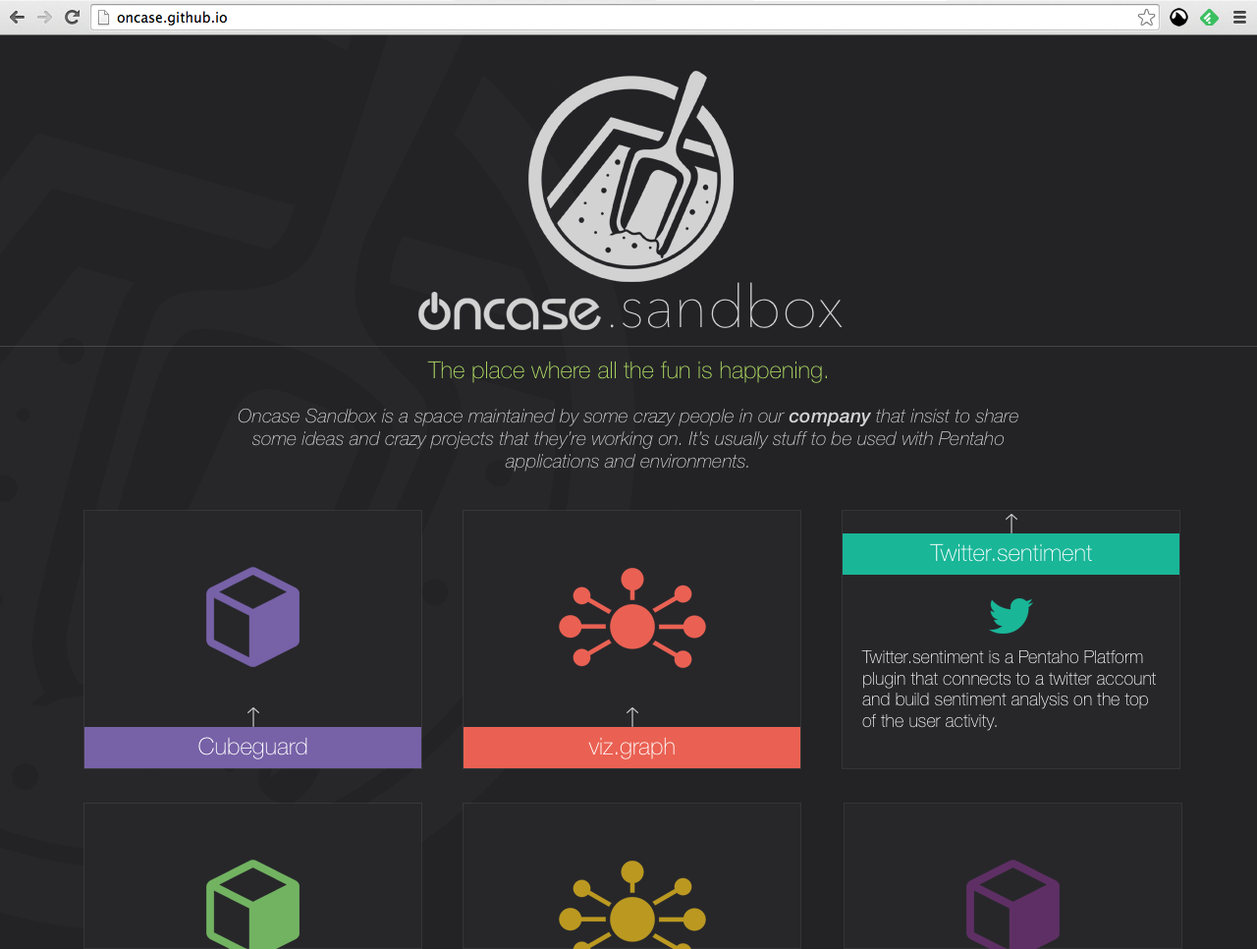
<style>
.page{position:relative;width:1257px;height:949px;background:#232326}
.page>*{position:absolute;margin:0}
.t1{font:58.9px "AvenirNext-UltraLight";color:#d2d2d2}
.t2{font:23.6px "HelveticaNeue-Thin";color:#b1de62}
.t3{font:19.1px "HelveticaNeue-ThinItalic";color:#d2d2d2}
.t4{font:19.1px "HelveticaNeue-MediumItalic";color:#d2d2d2}
.t5{font:23.6px "HelveticaNeue-Thin";color:#ffffff}
.t6{font:17.7px "HelveticaNeue-Thin"}
</style>
<div class="page">
<p class="t1" style="left:610px;top:282px;width:233px;height:46px">.sandbox</p>
<p class="t2" style="left:427px;top:360px;width:400px;height:23px">The place where all the fun is happening.</p>
<p class="t3" style="left:238px;top:408px;width:780px;height:63px;text-align:center">Oncase Sandbox is a space maintained by some crazy people in our <span class="t4">company </span>that insist to share some ideas and crazy projects that they’re working on. It’s usually stuff to be used with Pentaho applications and environments.</p>
<p class="t5" style="left:930px;top:543px;width:162px;height:19px">Twitter.sentiment</p>
<p class="t6" style="left:861px;top:649px;width:295px;height:82px">Twitter.sentiment is a Pentaho Platform plugin that connects to a twitter account and build sentiment analysis on the top of the user activity.</p>
<p class="t5" style="left:198px;top:737px;width:109px;height:22px">Cubeguard</p>
<p class="t5" style="left:588px;top:737px;width:87px;height:22px">viz.graph</p>
</div>
